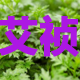
<style>
.page{position:relative;width:80px;height:80px;background:#ac17e3}
.page>*{position:absolute;margin:0}
.t1{font:41.4px "MicrosoftYaHei-Bold";color:#ac17e3;font-weight:bold;scale:0.95 1}
</style>
<div class="page">
<p class="t1" style="left:0px;top:15px;width:79px;height:42px">艾祯</p>
</div>
